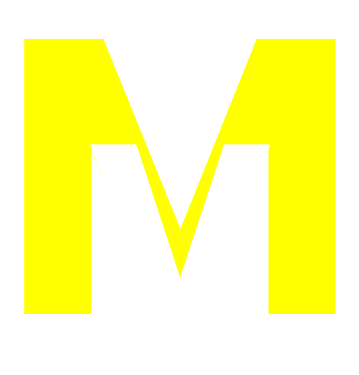
<style>
.page{position:relative;width:359px;height:375px;background:#ffffff}
.page>*{position:absolute;margin:0}
.t1{font:391.5px "Poppins-Bold";color:#ffff00}
</style>
<div class="page">
<p class="t1" style="left:24px;top:39px;width:312px;height:275px">M</p>
</div>
